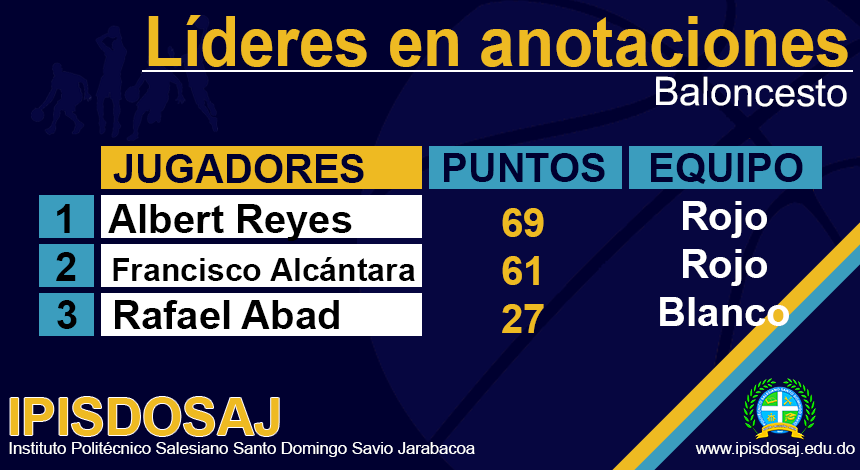
<style>
.page{position:relative;width:860px;height:470px;background:#000030}
.page>*{position:absolute;margin:0}
.t1{font:69.8px "Arial-BoldMT";color:#eeba22;scale:0.91 1}
.t2{font:39.5px "ArialMT";color:#ffffff}
.t3{font:40px "Arial-BoldMT";color:#000030}
.t4{font:40px "Arial-BoldMT";color:#000000}
.t5{font:40px "Arial-BoldMT";color:#eeba22}
.t6{font:40px "Arial-BoldMT";color:#ffffff}
.t7{font:32px "Arial-BoldMT";color:#000000}
.t8{font:51.7px "Arial-BoldMT";color:#eeba22}
.t9{font:16.6px "ArialMT";color:#ffffff}
</style>
<div class="page">
<p class="t1" style="left:148px;top:15px;width:700px;height:52px">Líderes en anotaciones</p>
<p class="t2" style="left:656px;top:76px;width:191px;height:31px">Baloncesto</p>
<p class="t3" style="left:36px;top:154px;width:328px;height:29px">0     JUGADORES</p>
<p class="t3" style="left:444px;top:153px;width:161px;height:29px">PUNTOS</p>
<p class="t3" style="left:651px;top:153px;width:152px;height:31px">EQUIPO</p>
<p class="t4" style="left:57px;top:204px;width:295px;height:37px">1   Albert Reyes</p>
<p class="t5" style="left:502px;top:208px;width:42px;height:125px;text-align:center">69<br>61<br>27</p>
<p class="t6" style="left:660px;top:201px;width:129px;height:125px;text-align:center">Rojo<br>Rojo<br>Blanco</p>
<p class="t7" style="left:56px;top:252px;width:359px;height:29px"><span class="t4">2   </span>Francisco Alcántara</p>
<p class="t4" style="left:57px;top:300px;width:282px;height:29px">3   Rafael Abad</p>
<p class="t8" style="left:10px;top:397px;width:269px;height:39px">IPISDOSAJ</p>
<p class="t9" style="left:9px;top:442px;width:846px;height:15px">Instituto Politécnico Salesiano Santo Domingo Savio Jarabacoa                                                www.ipisdosaj.edu.do</p>
</div>
